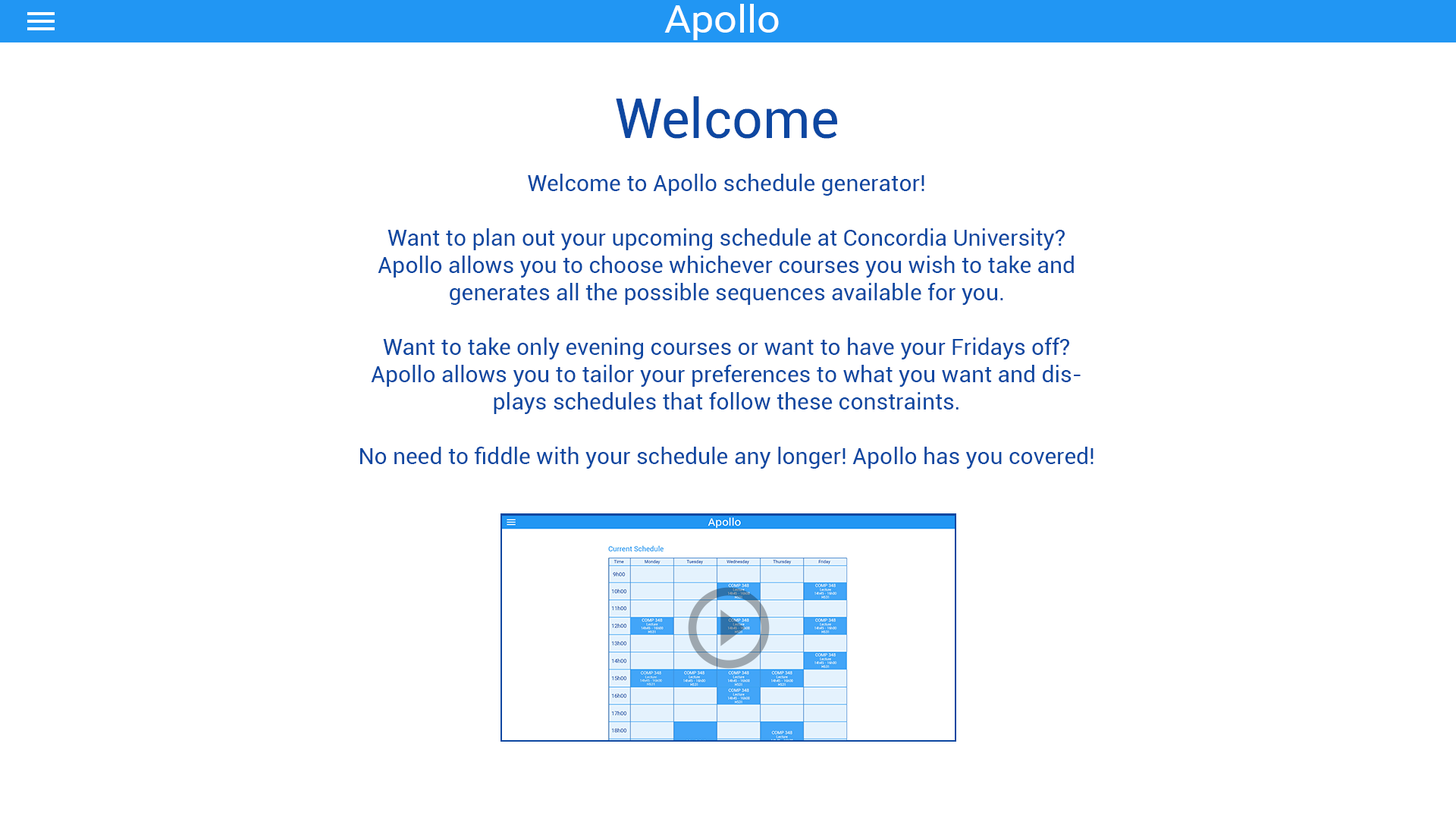
<style>
.page{position:relative;width:1456px;height:819px;background:#ffffff}
.page>*{position:absolute;margin:0}
.t1{font:37.7px "Roboto-Regular";color:#ffffff;scale:1.08 1}
.t2{font:54.6px "Roboto-Regular";color:#0d47a1}
.t3{font:22.7px "Roboto-Regular";color:#0d47a1}
</style>
<div class="page">
<p class="t1" style="left:664px;top:4px;width:115px;height:36px">Apollo</p>
<p class="t2" style="left:616px;top:96px;width:221px;height:43px">Welcome</p>
<p class="t3" style="left:360px;top:174px;width:734px;height:295px;text-align:center">Welcome to Apollo schedule generator!<br><br>Want to plan out your upcoming schedule at Concordia University?<br>Apollo allows you to choose whichever courses you wish to take and generates all the possible sequences available for you. <br><br>Want to take only evening courses or want to have your Fridays off?<br>Apollo allows you to tailor your preferences to what you want and displays schedules that follow these constraints. <br><br>No need to fiddle with your schedule any longer! Apollo has you covered!</p>
</div>
